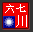
<style>
.page{position:relative;width:33px;height:32px;background:#f20000}
.page>*{position:absolute;margin:0}
.t1{font:10.4px "SimSun";color:#ffffff}
.t2{font:11.7px "SimSun";color:#ffffff}
</style>
<div class="page">
<p class="t1" style="left:5px;top:4px;width:21px;height:9px">六七</p>
<p class="t2" style="left:16px;top:15px;width:11px;height:12px">川</p>
</div>
